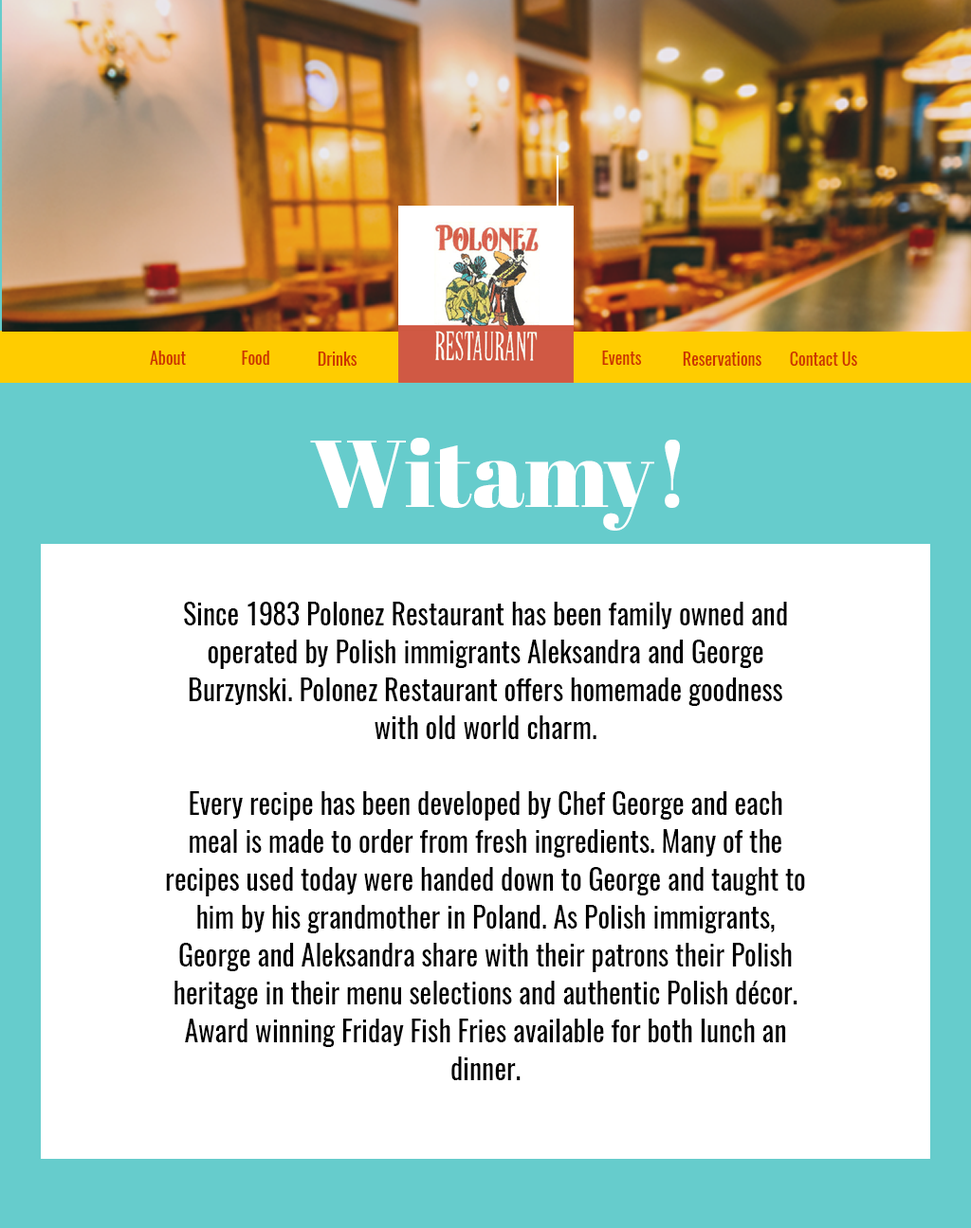
<style>
.page{position:relative;width:971px;height:1228px;background:#ffffff}
.page>*{position:absolute;margin:0}
.t1{font:16.8px "Oswald-Regular";color:#cc3300}
.t2{font:17.1px "Oswald-Regular";color:#cc3300}
.t3{font:94.8px "AbrilFatface-Regular";color:#ffffff}
.t4{font:28.4px/37.9px "Oswald-Regular";color:#000000}
</style>
<div class="page">
<p class="t1" style="left:150px;top:351px;width:36px;height:14px">About</p>
<p class="t2" style="left:242px;top:351px;width:27px;height:14px">Food</p>
<p class="t2" style="left:318px;top:352px;width:39px;height:14px">Drinks</p>
<p class="t2" style="left:602px;top:351px;width:40px;height:14px">Events</p>
<p class="t2" style="left:682px;top:352px;width:79px;height:14px">Reservations</p>
<p class="t2" style="left:790px;top:352px;width:67px;height:14px">Contact Us</p>
<p class="t3" style="left:310px;top:438px;width:370px;height:93px">Witamy!</p>
<p class="t4" style="left:166px;top:602px;width:639px;height:479px;text-align:center">Since 1983 Polonez Restaurant has been family owned and operated by Polish immigrants Aleksandra and George Burzynski. Polonez Restaurant offers homemade goodness with old world charm.<br><br>Every recipe has been developed by Chef George and each meal is made to order from fresh ingredients. Many of the recipes used today were handed down to George and taught to him by his grandmother in Poland. As Polish immigrants, George and Aleksandra share with their patrons their Polish heritage in their menu selections and authentic Polish décor. Award winning Friday Fish Fries available for both lunch an dinner.</p>
</div>
